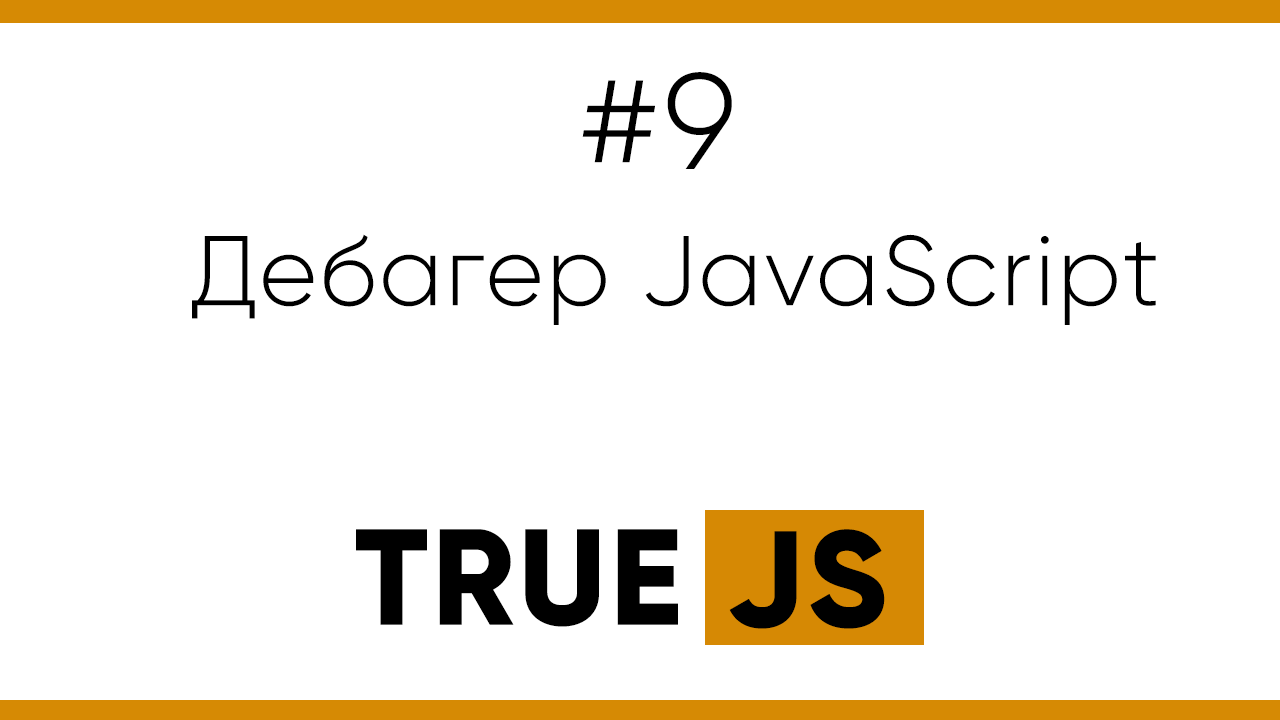
<style>
.page{position:relative;width:1280px;height:720px;background:#ffffff}
.page>*{position:absolute;margin:0}
.t1{font:136px "Gilroy-Light";letter-spacing:0.025em;color:#000000}
.t2{font:99px "Gilroy-Light";letter-spacing:0.025em;color:#000000}
.t3{font:136px "Gilroy-ExtraBold";letter-spacing:0.025em;color:#000000}
</style>
<div class="page">
<p class="t1" style="left:582px;top:72px;width:150px;height:97px">#9</p>
<p class="t2" style="left:192px;top:234px;width:964px;height:91px">Дебагер JavaScript</p>
<p class="t3" style="left:356px;top:529px;width:322px;height:98px">TRUE</p>
<p class="t3" style="left:729px;top:529px;width:156px;height:100px">JS</p>
</div>
